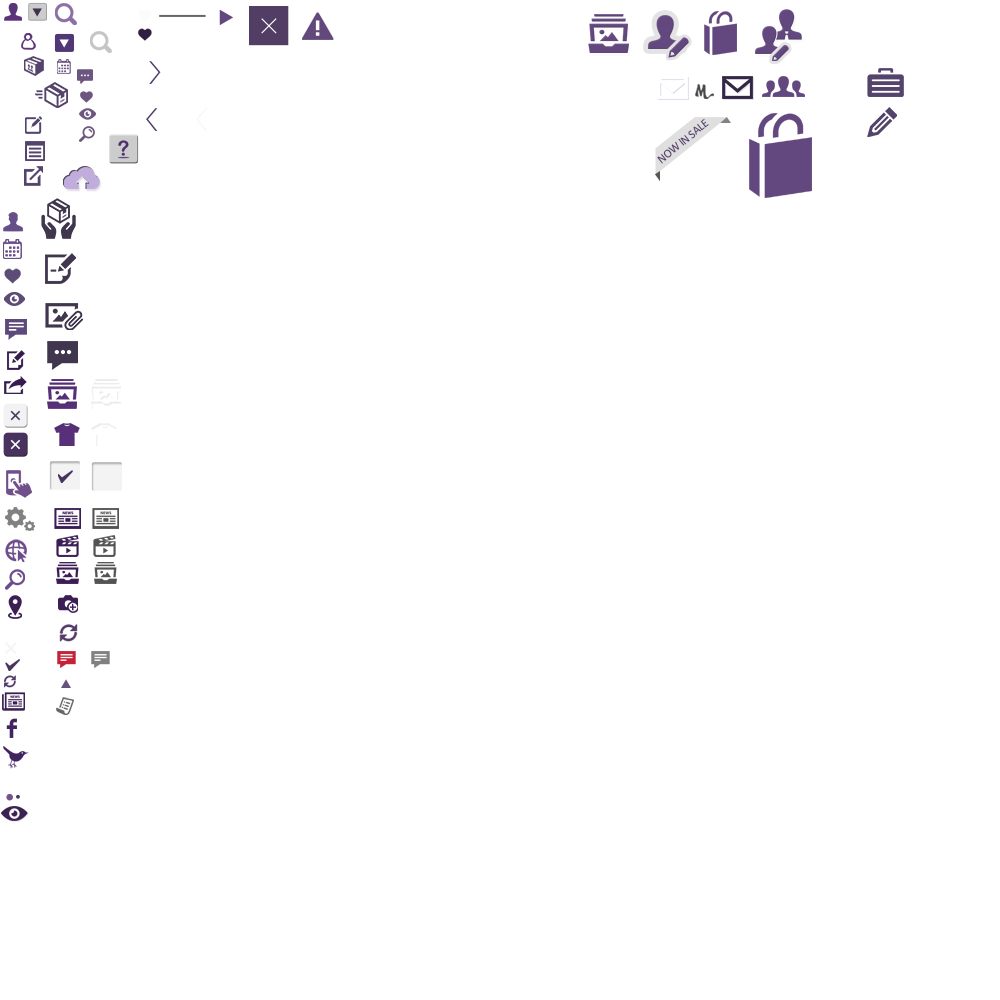
<style>
.page{position:relative;width:1000px;height:1000px;background:#ffffff}
.page>*{position:absolute;margin:0}
.t1{font:11.8px "Calibri";letter-spacing:-0.025em;color:#533b6a}
</style>
<div class="page">
<p class="t1" style="left:657px;top:119px;width:52px;height:45px;rotate:-39deg">NOW IN SALE</p>
</div>
